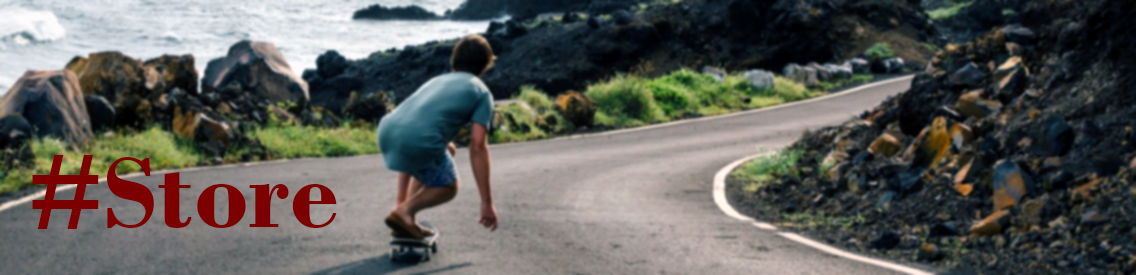
<style>
.page{position:relative;width:1136px;height:275px}
.page>*{position:absolute;margin:0}
.t1{font:106.1px "BodoniMT-Bold";color:#7c0000;scale:1.05 1}
</style>
<div class="page">
<p class="t1" style="left:32px;top:155px;width:305px;height:74px">Store#</p>
</div>
